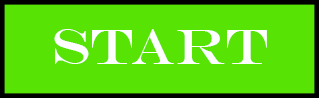
<style>
.page{position:relative;width:319px;height:98px;background:#57e405}
.page>*{position:absolute;margin:0}
.t1{font:50px "EngraversMT";color:#fefefe}
</style>
<div class="page">
<p class="t1" style="left:54px;top:29px;width:213px;height:35px">START</p>
</div>
